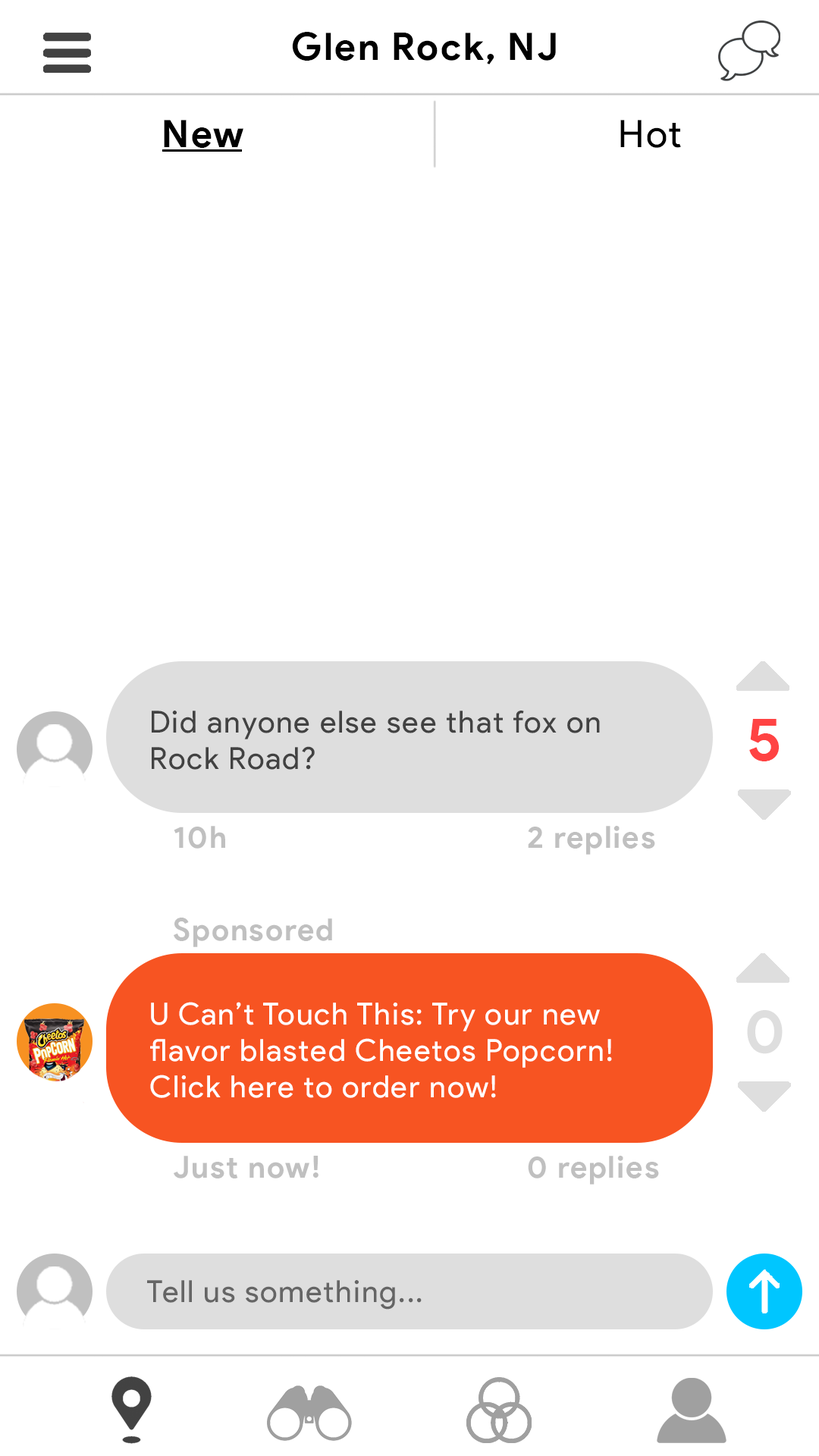
<style>
.page{position:relative;width:819px;height:1456px;background:#ffffff}
.page>*{position:absolute;margin:0}
.t1{font:37.9px "ProductSans-Bold";letter-spacing:0.05em;color:#000000}
.t2{font:37.9px "ProductSans-Regular";letter-spacing:0.05em;color:#000000}
.t3{font:30.3px/18.2px "ProductSans-Regular";letter-spacing:0.05em;color:#424242}
.t4{font:60.7px "ProductSans-Bold";letter-spacing:0.05em;color:#ff4343}
.t5{font:30.3px "ProductSans-Bold";letter-spacing:0.05em;color:#c0c0c0}
.t6{font:30.3px/18.2px "ProductSans-Regular";letter-spacing:0.05em;color:#ffffff}
.t7{font:60.7px "ProductSans-Bold";letter-spacing:0.05em;color:#dedede}
.t8{font:30.3px "ProductSans-Regular";letter-spacing:0.05em;color:#656565}
</style>
<div class="page">
<p class="t1" style="left:292px;top:32px;width:264px;height:32px">Glen Rock, NJ</p>
<p class="t1" style="left:164px;top:120px;width:79px;height:28px">New</p>
<p class="t2" style="left:620px;top:120px;width:61px;height:28px">Hot</p>
<p class="t3" style="left:152px;top:711px;width:448px;height:59px">Did anyone else see that fox on <br><br>Rock Road?</p>
<p class="t4" style="left:749px;top:719px;width:31px;height:42px">5</p>
<p class="t5" style="left:174px;top:826px;width:51px;height:23px">10h</p>
<p class="t5" style="left:528px;top:826px;width:127px;height:29px">2 replies</p>
<p class="t5" style="left:174px;top:918px;width:158px;height:29px">Sponsored</p>
<p class="t6" style="left:150px;top:1002px;width:462px;height:96px">U Can’t Touch This: Try our new<br><br>flavor blasted Cheetos Popcorn!<br><br>Click here to order now!</p>
<p class="t7" style="left:747px;top:1010px;width:36px;height:44px">0</p>
<p class="t5" style="left:174px;top:1156px;width:144px;height:22px">Just now!</p>
<p class="t5" style="left:528px;top:1156px;width:131px;height:29px">0 replies</p>
<p class="t8" style="left:147px;top:1280px;width:275px;height:30px">Tell us something...</p>
</div>
